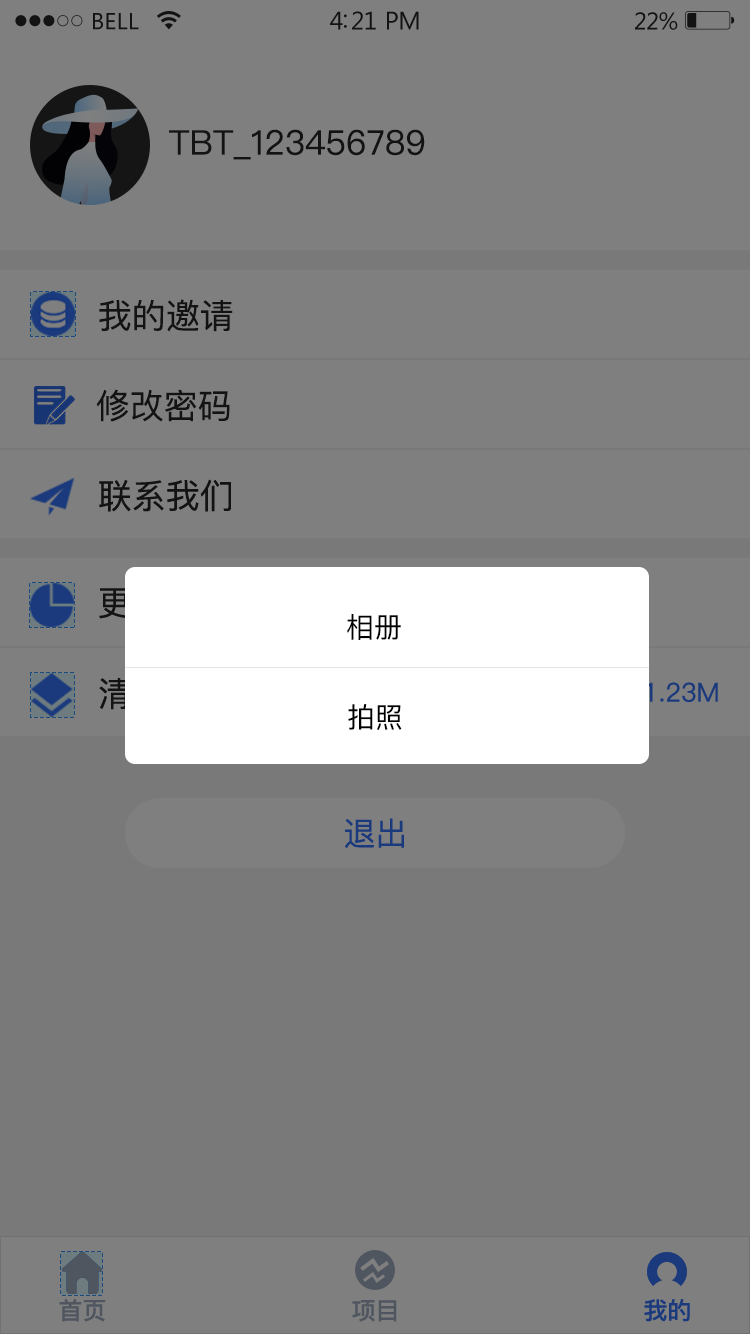
<style>
.page{position:relative;width:750px;height:1334px;background:#7f7f7f}
.page>*{position:absolute;margin:0}
.t1{font:34px "PingFangSC-Regular";color:#262626}
.t2{font:34px "PingFang-SC-Medium";color:#262626}
.t3{font:28px "PingFangSC-Regular";color:#000000}
.t4{font:26px "PingFang-SC-Medium";color:#1a3a7d}
.t5{font:32px "PingFang-SC-Medium";color:#1a3a7d}
.t6{font:24px "PingFang-SC-Bold";color:#505660}
.t7{font:24px "PingFang-SC-Bold";color:#1a3a7d}
</style>
<div class="page">
<p class="t1" style="left:169px;top:129px;width:256px;height:31px">TBT_123456789</p>
<p class="t1" style="left:99px;top:299px;width:134px;height:33px">我的邀请</p>
<p class="t1" style="left:96px;top:389px;width:134px;height:33px">修改密码</p>
<p class="t2" style="left:99px;top:479px;width:132px;height:33px">联系我们</p>
<p class="t3" style="left:347px;top:614px;width:54px;height:26px">相册</p>
<p class="t4" style="left:645px;top:682px;width:73px;height:20px">1.23M</p>
<p class="t3" style="left:348px;top:703px;width:54px;height:27px">拍照</p>
<p class="t5" style="left:345px;top:818px;width:59px;height:31px">退出</p>
<p class="t6" style="left:59px;top:1299px;width:47px;height:23px">首页</p>
<p class="t6" style="left:352px;top:1300px;width:45px;height:22px">项目</p>
<p class="t7" style="left:644px;top:1299px;width:46px;height:23px">我的</p>
</div>
